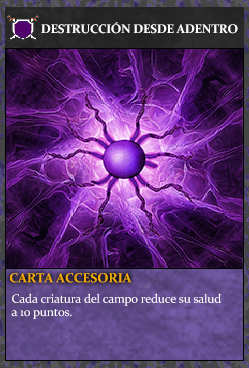
<style>
.page{position:relative;width:249px;height:368px}
.page>*{position:absolute;margin:0}
.t1{font:12.4px "Constantia-Bold";letter-spacing:-0.02em;color:#ffffff}
.t2{font:13.3px "Constantia-Bold";letter-spacing:-0.02em;color:#f2ac05}
.t3{font:12.3px/13.3px "Constantia";letter-spacing:-0.02em;color:#ffffff}
</style>
<div class="page">
<p class="t1" style="left:41px;top:22px;width:197px;height:12px">DESTRUCCIÓN DESDE ADENTRO</p>
<p class="t2" style="left:10px;top:273px;width:122px;height:10px">CARTA ACCESORIA</p>
<p class="t3" style="left:11px;top:293px;width:210px;height:26px">Cada criatura del campo reduce su salud<br>a 10 puntos.</p>
</div>
